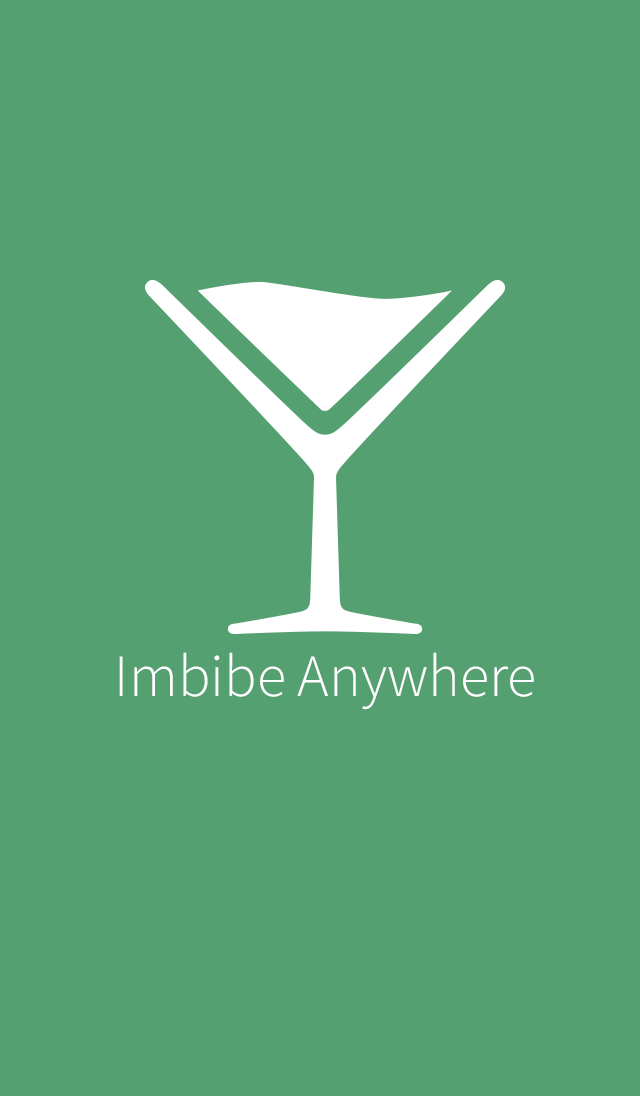
<style>
.page{position:relative;width:640px;height:1096px;background:#55a071}
.page>*{position:absolute;margin:0}
.t1{font:60px "SourceSansPro-Light";color:#ffffff}
</style>
<div class="page">
<p class="t1" style="left:119px;top:652px;width:415px;height:58px">Imbibe Anywhere</p>
</div>
